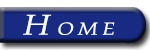
<style>
.page{position:relative;width:150px;height:50px;background:#192a83}
.page>*{position:absolute;margin:0}
.t1{font:17.3px "PalatinoLinotype-Italic";letter-spacing:0.2em;color:#f6fcfb;scale:1.22 1}
.t2{font:28.7px "PalatinoLinotype-Italic";letter-spacing:0.2em;color:#f6fcfb;scale:1.22 1}
</style>
<div class="page">
<p class="t1" style="left:23px;top:14px;width:92px;height:21px"><span class="t2">H</span>OME</p>
</div>
